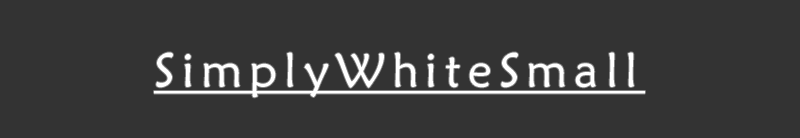
<style>
.page{position:relative;width:800px;height:138px;background:#333333}
.page>*{position:absolute;margin:0}
.t1{font:48px "MaiandraGD-Regular";letter-spacing:0.15em;color:#ffffff;text-decoration:underline}
</style>
<div class="page">
<p class="t1" style="left:154px;top:52px;width:491px;height:46px">SimplyWhiteSmall</p>
</div>
